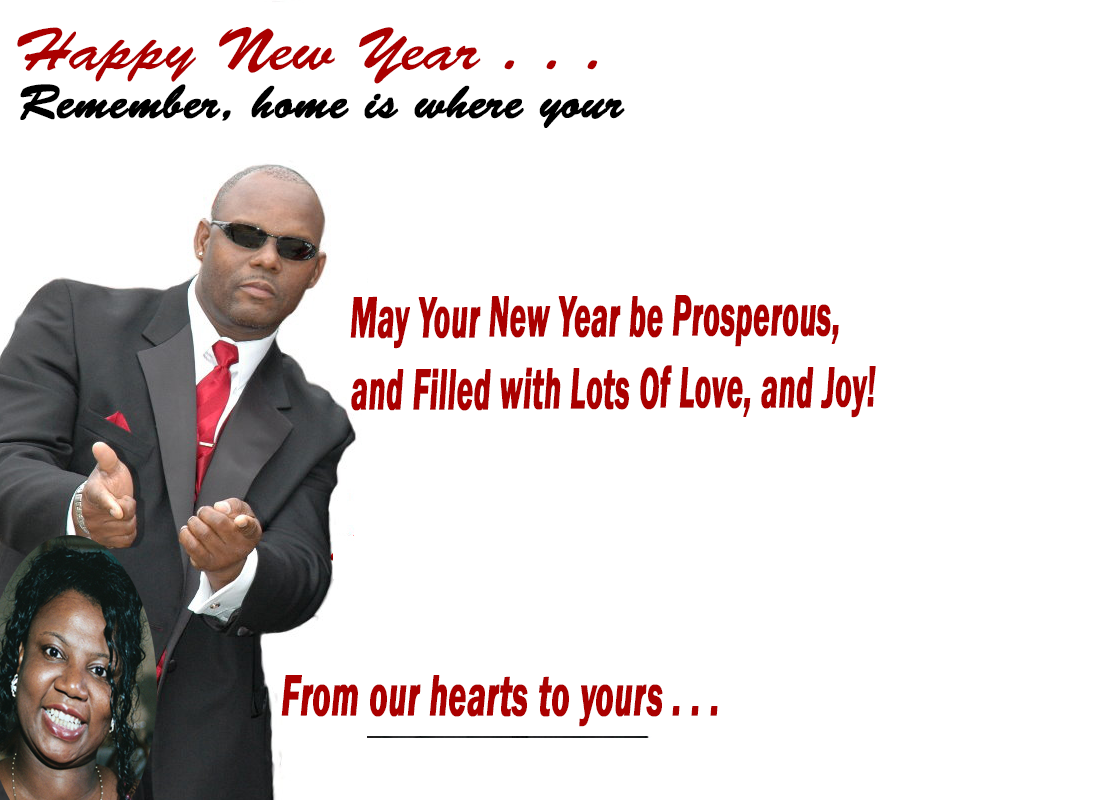
<style>
.page{position:relative;width:1100px;height:800px;background:#ffffff}
.page>*{position:absolute;margin:0}
.t1{font:60px "BrushScriptStd";color:#aa0000;scale:1.08 1}
.t2{font:48px "BrushScriptStd";color:#000000;font-weight:bold}
.t3{font:60px "FranklinGothic-DemiItalic";color:#aa0000;font-weight:bold;scale:0.51 1}
.t4{font:60px "FranklinGothic-DemiItalic";color:#aa0000;font-weight:bold;scale:0.56 1}
</style>
<div class="page">
<p class="t1" style="left:17px;top:27px;width:581px;height:57px">Happy New Year . . . .</p>
<p class="t2" style="left:20px;top:84px;width:605px;height:44px">Remember, home is where your heart is . . .</p>
<p class="t3" style="left:350px;top:295px;width:526px;height:123px">May Your New Year be Prosperous,<br>and Filled with Lots Of Love, and Joy!</p>
<p class="t4" style="left:281px;top:675px;width:437px;height:52px">From our hearts to yours . . .</p>
</div>
